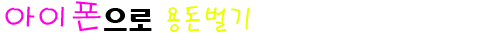
<style>
.page{position:relative;width:489px;height:37px;background:#ffffff}
.page>*{position:absolute;margin:0}
.t1{font:29.2px "PyunjiR-HM";color:#eaff00}
.t2{font:33.3px "H2porL";color:#ff00e4}
.t3{font:25px "HeadlineR-HM";color:#000000}
</style>
<div class="page">
<p class="t1" style="left:5px;top:1px;width:245px;height:31px"><span class="t2">아이폰</span><span class="t3">으로 </span>용돈벌기</p>
</div>
